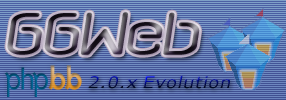
<style>
.page{position:relative;width:286px;height:100px}
.page>*{position:absolute;margin:0}
.t1{font:66.1px "QSwitchAx";letter-spacing:0.025em;font-style:italic;scale:0.86 1}
.t2{font:16px "Verdana";letter-spacing:0.025em;font-style:italic;scale:1.14 1}
</style>
<div class="page">
<p class="t1" style="left:7px;top:12px;width:193px;height:43px">GGWeb</p>
<p class="t2" style="left:88px;top:75px;width:142px;height:14px">2.0.x Evolution</p>
</div>
